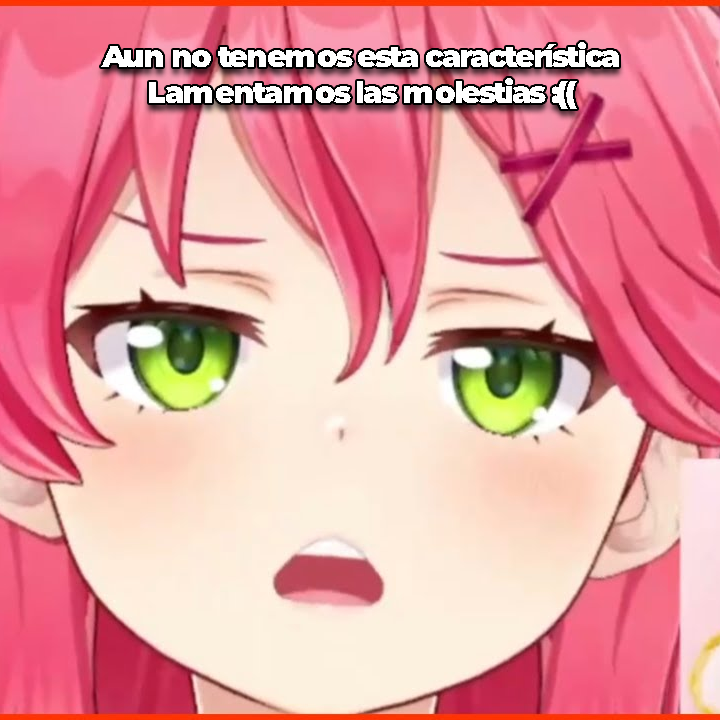
<style>
.page{position:relative;width:720px;height:720px}
.page>*{position:absolute;margin:0}
.t1{font:30.2px "MontserratRoman-Black";color:#ffffff}
</style>
<div class="page">
<p class="t1" style="left:101px;top:42px;width:518px;height:67px;text-align:center">Aun no tenemos esta característica<br>Lamentamos las molestias :((</p>
</div>
